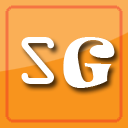
<style>
.page{position:relative;width:128px;height:128px;background:#f8941d}
.page>*{position:absolute;margin:0}
.t1{font:60px "OCRAStd";color:#ffffff;scale:1.1 1}
.t2{font:60px "Ravie";color:#ffffff;scale:1.1 1}
</style>
<div class="page">
<p class="t1" style="left:21px;top:37px;width:94px;height:51px">S<span class="t2">G</span></p>
</div>
